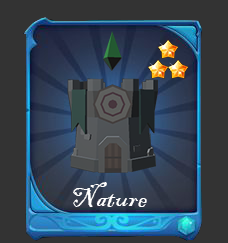
<style>
.page{position:relative;width:228px;height:243px;background:#333333}
.page>*{position:absolute;margin:0}
.t1{font:30px "BlackadderITC-Regular";color:#ffffff}
</style>
<div class="page">
<p class="t1" style="left:73px;top:182px;width:74px;height:25px">Nature</p>
</div>
